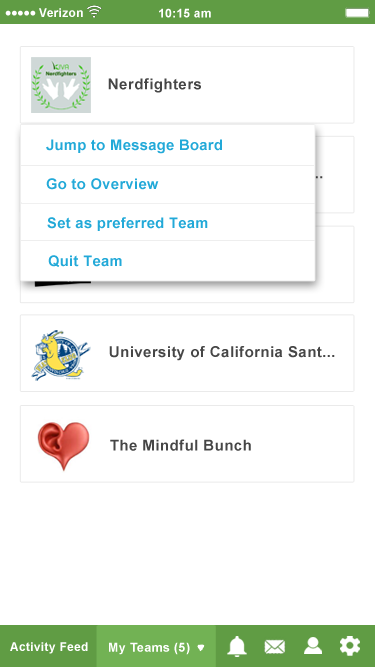
<style>
.page{position:relative;width:375px;height:667px;background:#ffffff}
.page>*{position:absolute;margin:0}
.t1{font:12px "Arial-BoldMT";letter-spacing:0.025em;color:#ffffff}
.t2{font:15.1px "Arial-BoldMT";letter-spacing:0.025em;color:#464646}
.t3{font:14.7px "Arial-BoldMT";letter-spacing:0.025em;color:#22a9d8}
.t4{font:12.5px "Arial-BoldMT";letter-spacing:0.025em;color:#ffffff}
</style>
<div class="page">
<p class="t1" style="left:39px;top:8px;width:44px;height:9px">Verizon</p>
<p class="t1" style="left:159px;top:8px;width:52px;height:10px">10:15 am</p>
<p class="t2" style="left:108px;top:78px;width:93px;height:15px">Nerdfighters</p>
<p class="t3" style="left:46px;top:139px;width:176px;height:15px">Jump to Message Board</p>
<p class="t3" style="left:46px;top:178px;width:113px;height:12px">Go to Overview</p>
<p class="t3" style="left:47px;top:217px;width:161px;height:14px">Set as preferred Team</p>
<p class="t3" style="left:48px;top:255px;width:74px;height:12px">Quit Team</p>
<p class="t2" style="left:109px;top:346px;width:226px;height:15px">University of California Sant...</p>
<p class="t2" style="left:110px;top:439px;width:141px;height:12px">The Mindful Bunch</p>
<p class="t1" style="left:10px;top:642px;width:78px;height:12px">Activity Feed</p>
<p class="t4" style="left:109px;top:642px;width:81px;height:13px">My Teams (5)</p>
</div>
